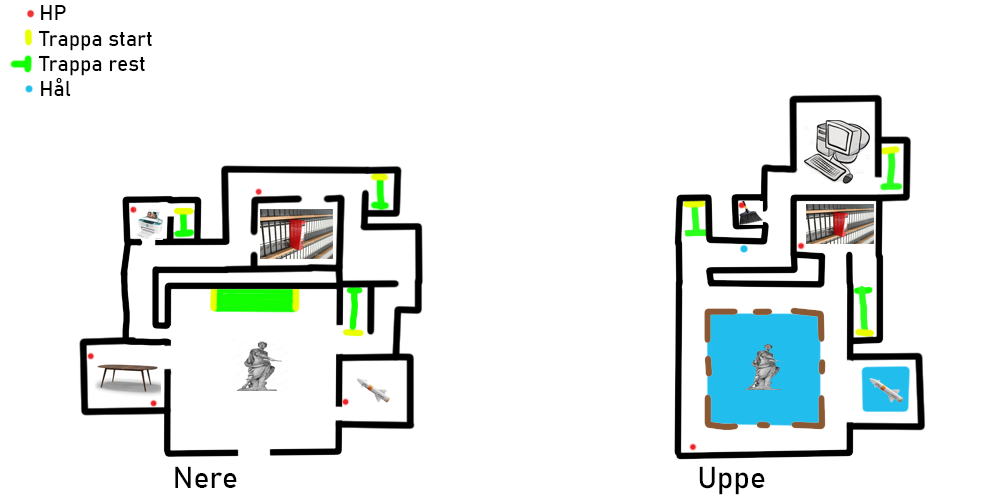
<style>
.page{position:relative;width:1000px;height:500px;background:#ffffff}
.page>*{position:absolute;margin:0}
.t1{font:21px "Bahnschrift";color:#000000}
.t2{font:30px "Bahnschrift";color:#000000}
</style>
<div class="page">
<p class="t1" style="left:38px;top:5px;width:114px;height:92px">HP<br>Trappa start<br>Trappa rest<br>Hål</p>
<p class="t2" style="left:175px;top:466px;width:62px;height:22px">Nere</p>
<p class="t2" style="left:699px;top:466px;width:66px;height:29px">Uppe</p>
</div>
